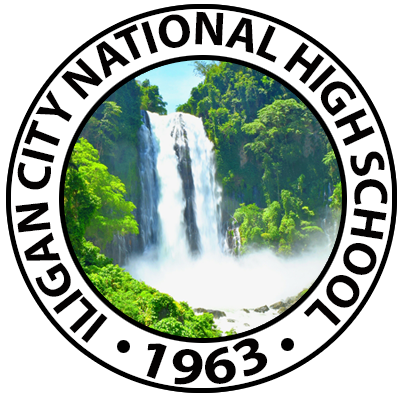
<style>
.page{position:relative;width:404px;height:407px;background:#ffffff}
.page>*{position:absolute;margin:0}
.t1{font:48px "MyriadPro-Bold";letter-spacing:-0.06em;color:#040202}
.t2{font:53.8px "MyriadPro-Bold";letter-spacing:0.06em;color:#040202;scale:1.13 1}
</style>
<div class="page">
<p class="t1" style="left:15px;top:11px;width:373px;height:332px">ILIGAN CITY NATIONAL HIGH SCHOOL</p>
<p class="t2" style="left:146px;top:338px;width:122px;height:47px;rotate:23deg">1963</p>
</div>
